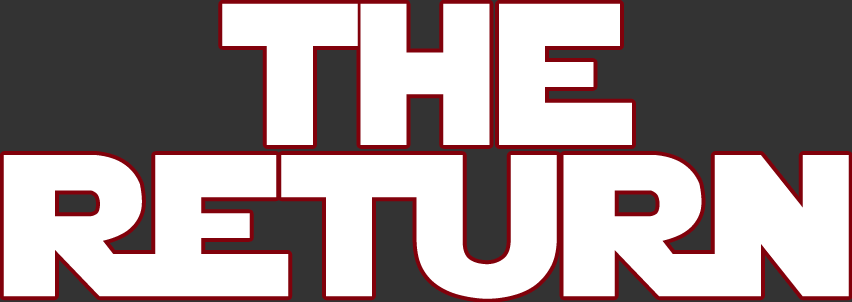
<style>
.page{position:relative;width:852px;height:302px;background:#ffffff}
.page>*{position:absolute;margin:0}
.t1{font:200px "StarJedi";color:#ffffff}
</style>
<div class="page">
<p class="t1" style="left:222px;top:3px;width:410px;height:142px">the</p>
<p class="t1" style="left:3px;top:155px;width:846px;height:144px">return</p>
</div>
